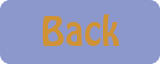
<style>
.page{position:relative;width:160px;height:64px;background:#8c97cb}
.page>*{position:absolute;margin:0}
.t1{font:36px "HoboStd";color:#cf9336}
</style>
<div class="page">
<p class="t1" style="left:42px;top:14px;width:77px;height:32px">Back</p>
</div>
